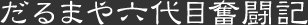
<style>
.page{position:relative;width:308px;height:25px;background:#333333}
.page>*{position:absolute;margin:0}
.t1{font:34px "DFLeiSho-SB-MP-RKSJ-H";color:#ffffff}
.t2{font:34px "DFLeiSho-SB-MP-RKSJ-H";letter-spacing:-0.1em;color:#ffffff}
.t3{font:34px "DFLeiSho-SB-MP-RKSJ-H";letter-spacing:-0.2em;color:#ffffff}
.t4{font:34px "DFLeiSho-SB-MP-RKSJ-H";letter-spacing:-0.15em;color:#ffffff}
.t5{font:34px "DFLeiSho-SB-MP-RKSJ-H";letter-spacing:-0.05em;color:#ffffff}
</style>
<div class="page">
<p class="t1" style="left:0px;top:0px;width:308px;height:25px"><span class="t2">だ</span><span class="t3">る</span><span class="t4">ま</span><span class="t5">や</span>六<span class="t4">代目</span>奮闘記</p>
</div>
